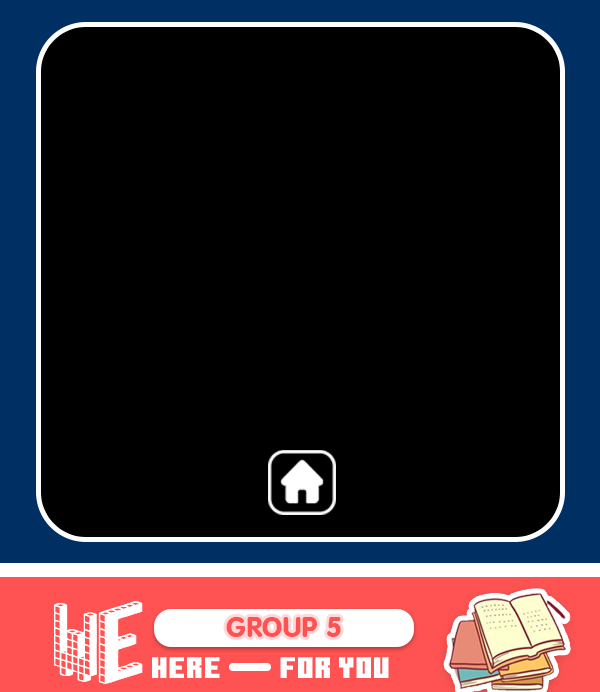
<style>
.page{position:relative;width:600px;height:692px;background:#000000}
.page>*{position:absolute;margin:0}
.t1{font:84.9px "Blox-(BRK";color:#ffffff;scale:1.05 1}
.t2{font:41.7px "DSNSuKumWit";color:#ff5353}
.t3{font:29.8px "MinecraftTen";color:#ffffff}
</style>
<div class="page">
<p class="t1" style="left:54px;top:601px;width:89px;height:83px">We</p>
<p class="t2" style="left:226px;top:617px;width:115px;height:20px">GROUP 5</p>
<p class="t3" style="left:152px;top:657px;width:68px;height:21px">Here</p>
<p class="t3" style="left:280px;top:657px;width:109px;height:21px">for you</p>
</div>
